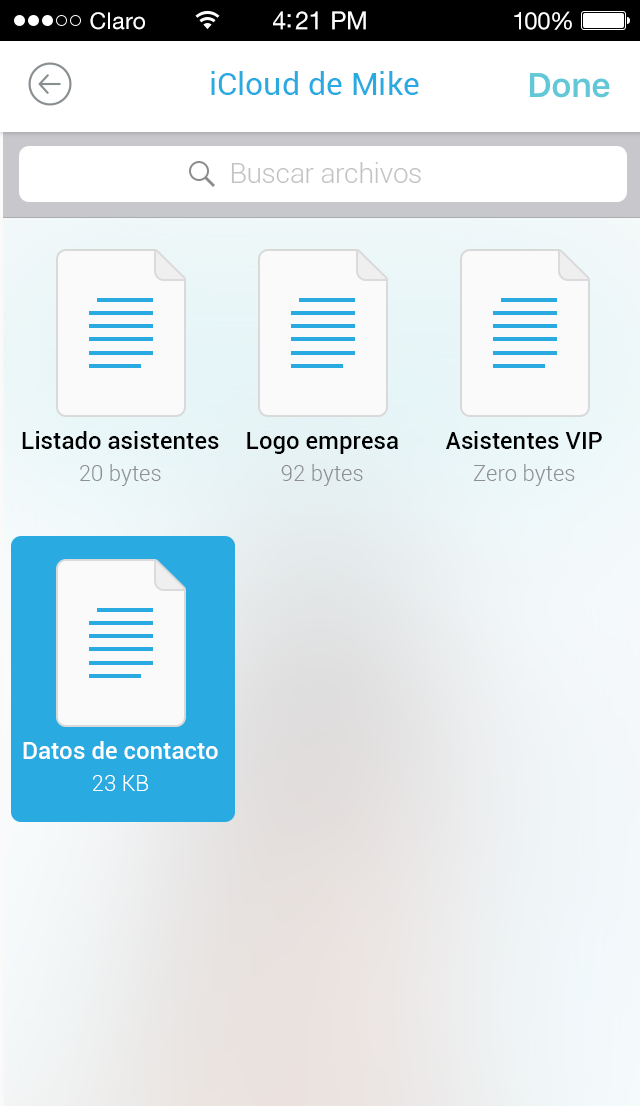
<style>
.page{position:relative;width:640px;height:1106px}
.page>*{position:absolute;margin:0}
.t1{font:23px "HelveticaNeueLTStd-Roman";letter-spacing:0.02em;color:#ffffff}
.t2{font:25px "HelveticaNeueLTStd-Roman";letter-spacing:-0.02em;color:#ffffff}
.t3{font:24px "HelveticaNeueLTStd-Roman";letter-spacing:-0.02em;color:#ffffff}
.t4{font:32px "Roboto-Regular";color:#29abe2}
.t5{font:28px "Roboto-Light";letter-spacing:-0.01em;color:#c3c3c3}
.t6{font:24px "Roboto-Medium";color:#000000}
.t7{font:22px "Roboto-Light";letter-spacing:0.005em;color:#8e8e93}
.t8{font:24px "Roboto-Medium";color:#ffffff}
.t9{font:22px "Roboto-Light";letter-spacing:0.005em;color:#ffffff}
</style>
<div class="page">
<p class="t1" style="left:90px;top:12px;width:55px;height:18px">Claro</p>
<p class="t2" style="left:273px;top:11px;width:93px;height:19px">4:21 PM</p>
<p class="t3" style="left:514px;top:11px;width:58px;height:19px">100%</p>
<p class="t4" style="left:211px;top:71px;width:208px;height:24px">iCloud de Mike</p>
<p class="t5" style="left:231px;top:162px;width:190px;height:21px">Buscar archivos</p>
<p class="t6" style="left:22px;top:431px;width:197px;height:18px">Listado asistentes</p>
<p class="t6" style="left:247px;top:432px;width:151px;height:22px">Logo empresa</p>
<p class="t6" style="left:446px;top:431px;width:156px;height:18px">Asistentes VIP</p>
<p class="t7" style="left:80px;top:464px;width:81px;height:22px">20 bytes</p>
<p class="t7" style="left:281px;top:464px;width:82px;height:22px">92 bytes</p>
<p class="t7" style="left:473px;top:464px;width:102px;height:22px">Zero bytes</p>
<p class="t8" style="left:23px;top:741px;width:195px;height:18px">Datos de contacto</p>
<p class="t9" style="left:93px;top:775px;width:55px;height:16px">23 KB</p>
</div>
